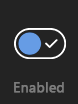
<style>
.page{position:relative;width:78px;height:104px;background:#232323}
.page>*{position:absolute;margin:0}
.t1{font:14px "SegoeUI";color:#7c7c7c;font-weight:bold}
</style>
<div class="page">
<p class="t1" style="left:14px;top:82px;width:50px;height:11px">Enabled</p>
</div>
